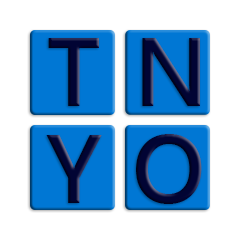
<style>
.page{position:relative;width:240px;height:240px;background:#ffffff}
.page>*{position:absolute;margin:0}
.t1{font:96.8px "SegoeUI-Semibold";color:#010434}
</style>
<div class="page">
<p class="t1" style="left:48px;top:38px;width:51px;height:68px">T</p>
<p class="t1" style="left:142px;top:38px;width:58px;height:68px">N</p>
<p class="t1" style="left:46px;top:135px;width:56px;height:68px">Y</p>
<p class="t1" style="left:136px;top:134px;width:66px;height:70px">O</p>
</div>
